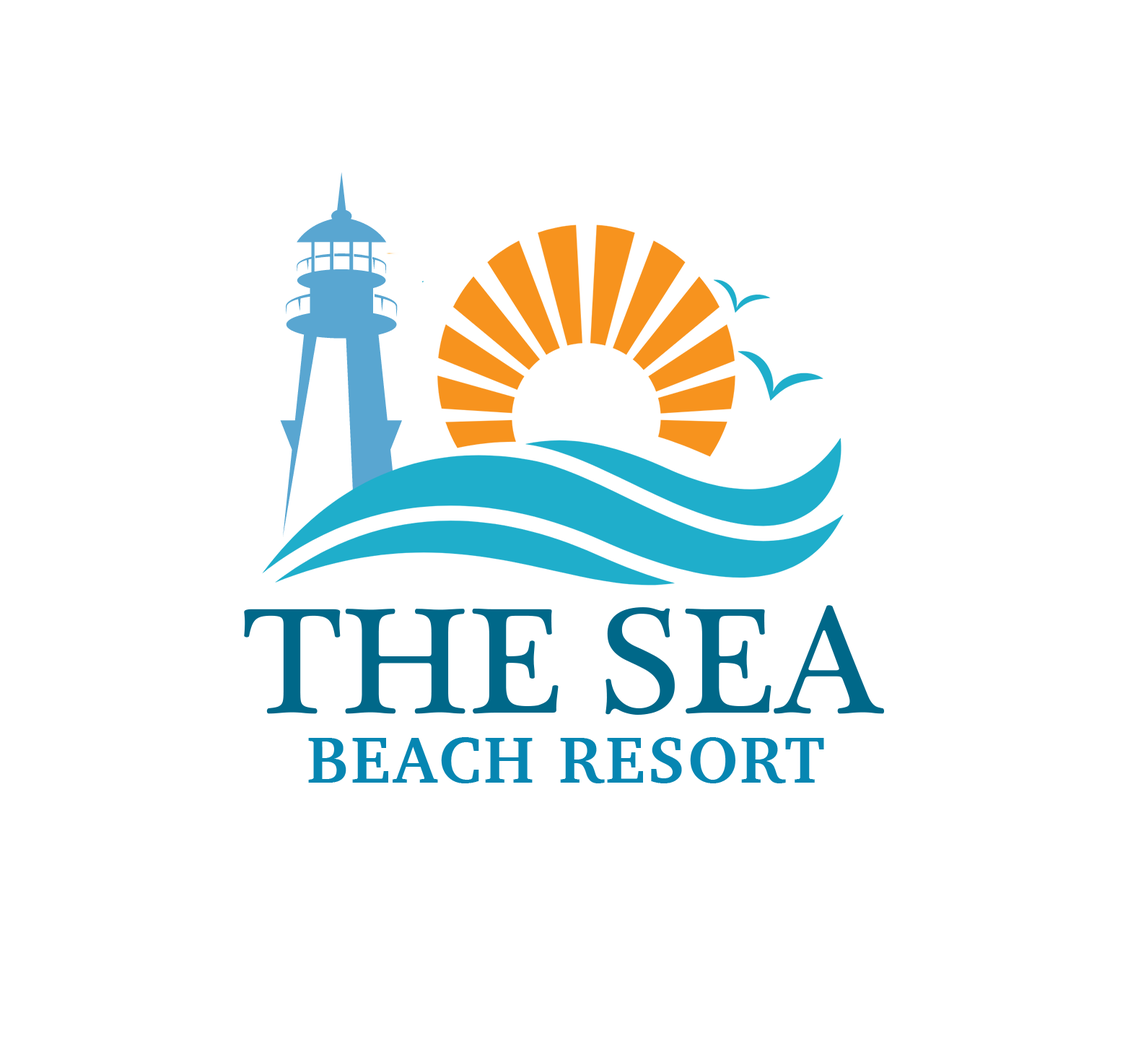
<style>
.page{position:relative;width:1128px;height:1057px;background:#ffffff}
.page>*{position:absolute;margin:0}
.t1{font:153.4px "PlantagenetCherokee";color:#006889}
.t2{font:66.2px "Charter-Bold";letter-spacing:0.04em;color:#0686b2}
</style>
<div class="page">
<p class="t1" style="left:244px;top:605px;width:640px;height:110px">THE SEA</p>
<p class="t2" style="left:308px;top:737px;width:516px;height:46px">BEACH RESORT</p>
</div>
